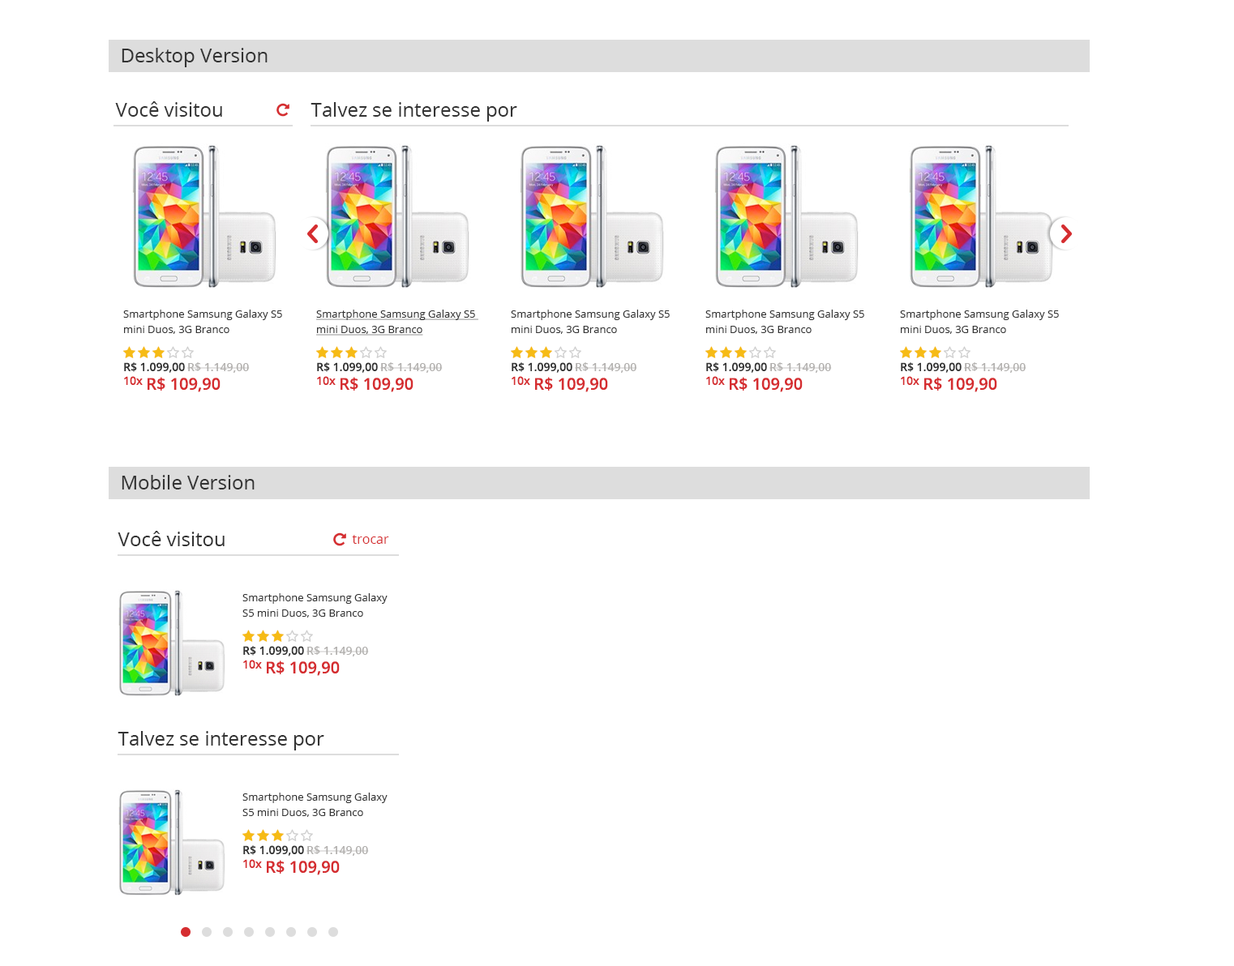
<style>
.page{position:relative;width:1234px;height:966px;background:#ffffff}
.page>*{position:absolute;margin:0}
.t1{font:19.5px "OpenSans";color:#333333}
.t2{font:10.5px/15.4px "OpenSans";color:#333333}
.t3{font:10.5px/15.4px "OpenSans";color:#333333;text-decoration:underline}
.t4{font:11.4px "OpenSans-Semibold";color:#333333}
.t5{font:11.4px "OpenSans-Semibold";color:#b2b0ae}
.t6{font:11.4px "OpenSans-Semibold";color:#d52d30}
.t7{font:16.2px "OpenSans-Semibold";color:#d52d30}
.t8{font:13px "OpenSans";color:#d52d30}
</style>
<div class="page">
<p class="t1" style="left:122px;top:48px;width:146px;height:19px">Desktop Version</p>
<p class="t1" style="left:115px;top:101px;width:107px;height:16px">Você visitou</p>
<p class="t1" style="left:311px;top:102px;width:206px;height:20px">Talvez se interesse por</p>
<p class="t2" style="left:123px;top:310px;width:159px;height:24px">Smartphone Samsung Galaxy S5 <br>mini Duos, 3G Branco</p>
<p class="t3" style="left:316px;top:310px;width:162px;height:26px">Smartphone Samsung Galaxy S5 <br>mini Duos, 3G Branco</p>
<p class="t2" style="left:511px;top:310px;width:159px;height:24px">Smartphone Samsung Galaxy S5 <br>mini Duos, 3G Branco</p>
<p class="t2" style="left:705px;top:310px;width:159px;height:24px">Smartphone Samsung Galaxy S5 <br>mini Duos, 3G Branco</p>
<p class="t2" style="left:900px;top:310px;width:159px;height:24px">Smartphone Samsung Galaxy S5 <br>mini Duos, 3G Branco</p>
<p class="t4" style="left:124px;top:362px;width:61px;height:11px">R$ 1.099,00</p>
<p class="t5" style="left:187px;top:362px;width:63px;height:11px">R$ 1.149,00</p>
<p class="t4" style="left:317px;top:362px;width:61px;height:11px">R$ 1.099,00</p>
<p class="t5" style="left:380px;top:362px;width:63px;height:11px">R$ 1.149,00</p>
<p class="t4" style="left:512px;top:362px;width:60px;height:11px">R$ 1.099,00</p>
<p class="t5" style="left:575px;top:362px;width:62px;height:11px">R$ 1.149,00</p>
<p class="t4" style="left:706px;top:362px;width:61px;height:11px">R$ 1.099,00</p>
<p class="t5" style="left:769px;top:362px;width:63px;height:11px">R$ 1.149,00</p>
<p class="t4" style="left:901px;top:362px;width:61px;height:11px">R$ 1.099,00</p>
<p class="t5" style="left:964px;top:362px;width:62px;height:11px">R$ 1.149,00</p>
<p class="t6" style="left:124px;top:376px;width:19px;height:9px">10x</p>
<p class="t7" style="left:148px;top:377px;width:73px;height:15px">R$ 109,90</p>
<p class="t6" style="left:317px;top:376px;width:19px;height:9px">10x</p>
<p class="t7" style="left:341px;top:377px;width:72px;height:15px">R$ 109,90</p>
<p class="t6" style="left:512px;top:376px;width:18px;height:9px">10x</p>
<p class="t7" style="left:535px;top:377px;width:73px;height:15px">R$ 109,90</p>
<p class="t6" style="left:706px;top:376px;width:19px;height:9px">10x</p>
<p class="t7" style="left:730px;top:377px;width:73px;height:15px">R$ 109,90</p>
<p class="t6" style="left:901px;top:376px;width:18px;height:9px">10x</p>
<p class="t7" style="left:924px;top:377px;width:73px;height:15px">R$ 109,90</p>
<p class="t1" style="left:122px;top:475px;width:133px;height:15px">Mobile Version</p>
<p class="t1" style="left:118px;top:531px;width:107px;height:15px">Você visitou</p>
<p class="t8" style="left:352px;top:535px;width:37px;height:9px">trocar</p>
<p class="t2" style="left:242px;top:593px;width:146px;height:25px">Smartphone Samsung Galaxy <br>S5 mini Duos, 3G Branco</p>
<p class="t4" style="left:243px;top:646px;width:61px;height:11px">R$ 1.099,00</p>
<p class="t5" style="left:306px;top:646px;width:63px;height:11px">R$ 1.149,00</p>
<p class="t6" style="left:243px;top:660px;width:19px;height:9px">10x</p>
<p class="t7" style="left:267px;top:661px;width:73px;height:15px">R$ 109,90</p>
<p class="t1" style="left:118px;top:731px;width:206px;height:20px">Talvez se interesse por</p>
<p class="t2" style="left:242px;top:793px;width:146px;height:24px">Smartphone Samsung Galaxy <br>S5 mini Duos, 3G Branco</p>
<p class="t4" style="left:243px;top:846px;width:61px;height:10px">R$ 1.099,00</p>
<p class="t5" style="left:306px;top:846px;width:63px;height:10px">R$ 1.149,00</p>
<p class="t6" style="left:243px;top:859px;width:19px;height:9px">10x</p>
<p class="t7" style="left:267px;top:860px;width:73px;height:16px">R$ 109,90</p>
</div>
